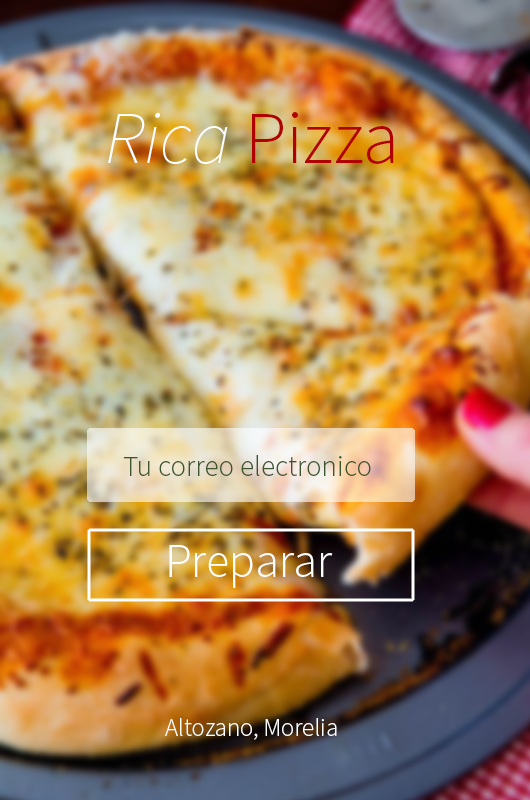
<style>
.page{position:relative;width:530px;height:800px}
.page>*{position:absolute;margin:0}
.t1{font:75px "SourceSansPro-Light";color:#b10202}
.t2{font:75px "SourceSansPro-ExtraLightIt";color:#ffffff}
.t3{font:29.2px "SourceSansPro-Light";color:#3d552f}
.t4{font:47.9px "SourceSansPro-Light";color:#ffffff}
.t5{font:25px "SourceSansPro-Light";color:#ffffff}
</style>
<div class="page">
<p class="t1" style="left:108px;top:112px;width:286px;height:52px"><span class="t2">Rica </span>Pizza</p>
<p class="t3" style="left:123px;top:455px;width:248px;height:21px">Tu correo electronico</p>
<p class="t4" style="left:169px;top:545px;width:164px;height:43px">Preparar</p>
<p class="t5" style="left:165px;top:718px;width:172px;height:22px">Altozano, Morelia</p>
</div>
